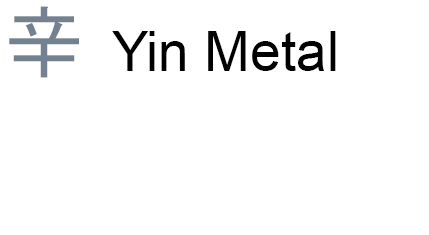
<style>
.page{position:relative;width:429px;height:235px;background:#ffffff}
.page>*{position:absolute;margin:0}
.t1{font:55px "ArialMT";color:#000000}
.t2{font:80px "MS-Gothic";color:#748191}
</style>
<div class="page">
<p class="t1" style="left:9px;top:6px;width:327px;height:72px"><span class="t2">辛 </span>Yin Metal</p>
</div>
